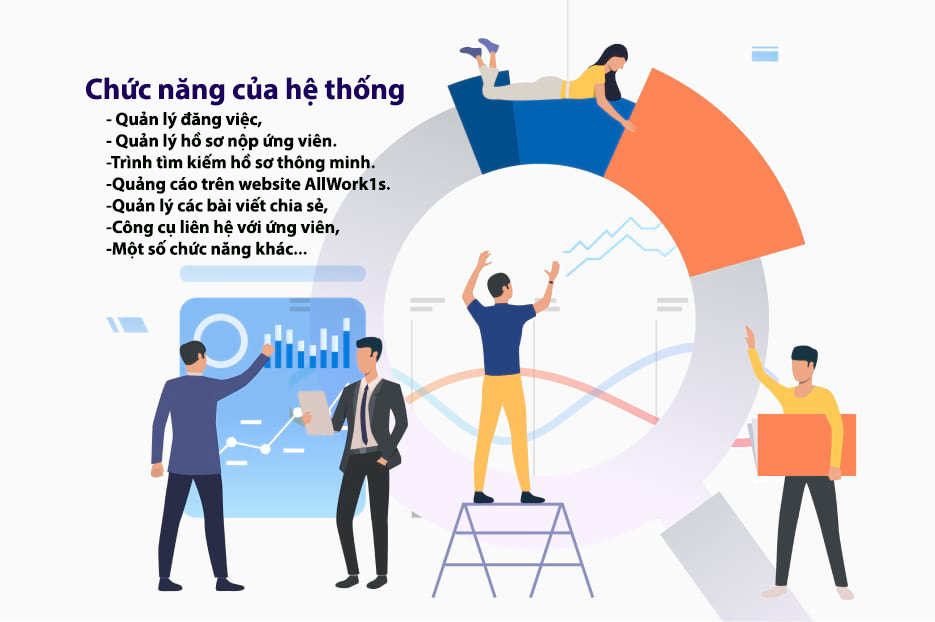
<style>
.page{position:relative;width:935px;height:622px;background:#fafafa}
.page>*{position:absolute;margin:0}
.t1{font:30px "MyriadPro-Bold";color:#1a005b}
.t2{font:18px "MyriadPro-Bold";color:#010601}
</style>
<div class="page">
<p class="t1" style="left:86px;top:75px;width:318px;height:31px">Chức năng của hệ thống</p>
<p class="t2" style="left:106px;top:111px;width:284px;height:148px">- Quản lý đăng việc,<br>- Quản lý hồ sơ nộp ứng viên.<br>-Trình tìm kiếm hồ sơ thông minh.<br>-Quảng cáo trên website AllWork1s.<br>-Quản lý các bài viết chia sẻ,<br>-Công cụ liên hệ với ứng viên,<br>-Một số chức năng khác...</p>
</div>
